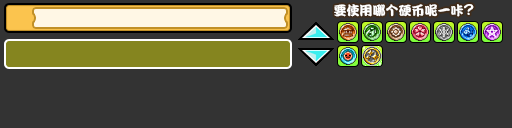
<style>
.page{position:relative;width:512px;height:128px;background:#333333}
.page>*{position:absolute;margin:0}
.t1{font:13px "DFPKanTingLiuW9";color:#ffffff}
.t2{font:16px "DFPKanTingLiuW9";color:#ffffff}
</style>
<div class="page">
<p class="t1" style="left:334px;top:4px;width:140px;height:13px">要使用哪个硬币呢一咔<span class="t2">?</span></p>
</div>
